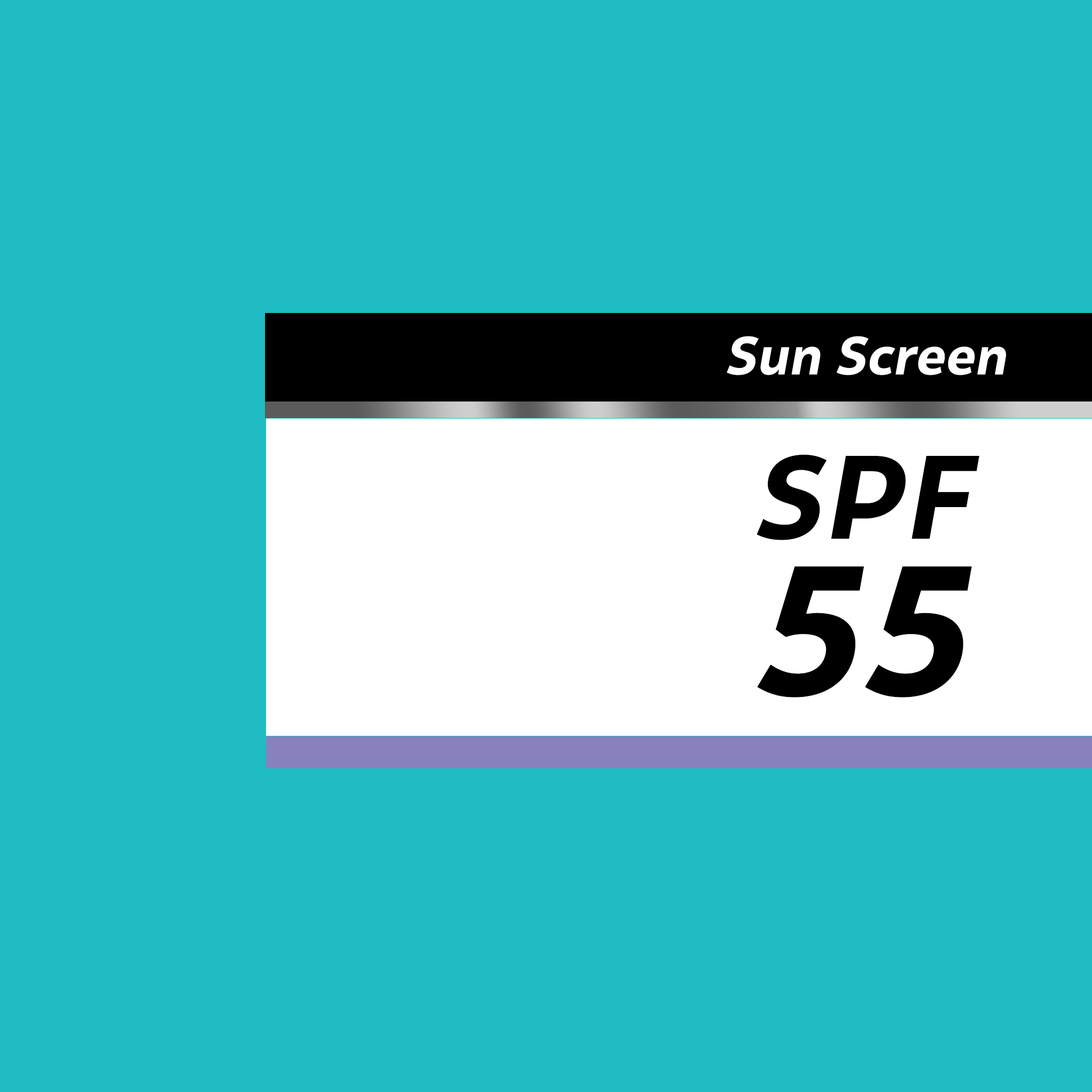
<style>
.page{position:relative;width:1092px;height:1092px;background:#1fbcc4}
.page>*{position:absolute;margin:0}
.t1{font:53.6px "Malva-Bold";letter-spacing:0.01em;color:#ffffff;font-style:italic}
.t2{font:118.3px "Malva-Bold";letter-spacing:0.01em;color:#000000;font-style:italic}
.t3{font:184.3px "Malva-Bold";letter-spacing:0.01em;color:#000000;font-style:italic}
</style>
<div class="page">
<p class="t1" style="left:727px;top:336px;width:279px;height:39px">Sun Screen</p>
<p class="t2" style="left:757px;top:454px;width:222px;height:86px">SPF</p>
<p class="t3" style="left:757px;top:566px;width:215px;height:131px">55</p>
</div>
